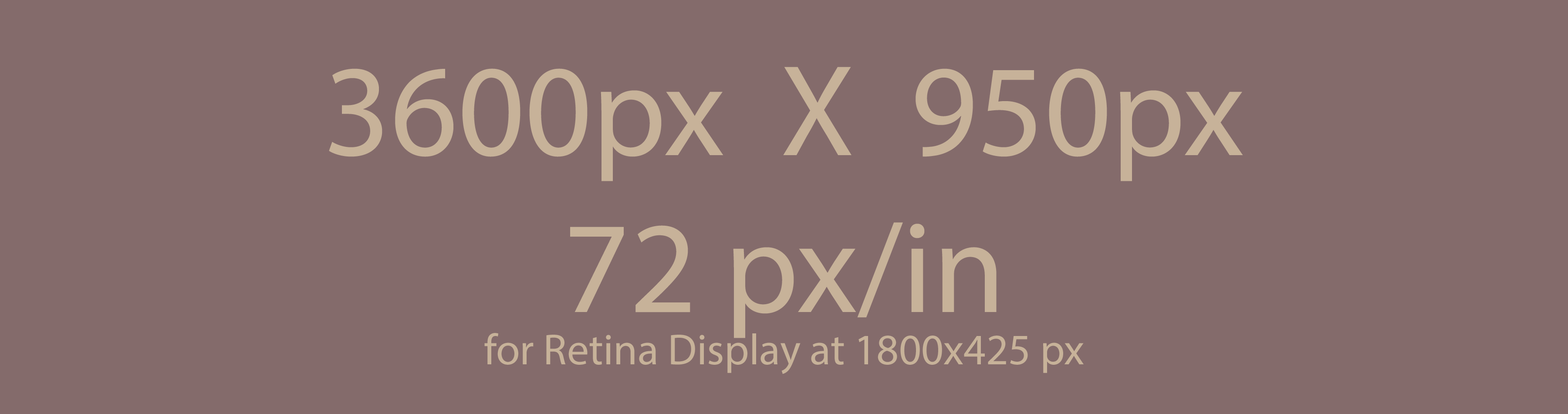
<style>
.page{position:relative;width:1568px;height:414px;background:#846b6b}
.page>*{position:absolute;margin:0}
.t1{font:43.6px "MyriadPro-Regular";color:#c7b299}
.t2{font:130.7px "MyriadPro-Regular";color:#c7b299}
</style>
<div class="page">
<p class="t1" style="left:329px;top:67px;width:914px;height:307px;text-align:center"><span class="t2">3600px  X  950px<br>72 px/in<br></span>for Retina Display at 1800x425 px</p>
</div>
